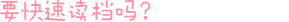
<style>
.page{position:relative;width:289px;height:22px;background:#ffffff}
.page>*{position:absolute;margin:0}
.t1{font:26px "¢è?";color:#ff93a5}
</style>
<div class="page">
<p class="t1" style="left:0px;top:0px;width:151px;height:22px">要快速读档吗？</p>
</div>
